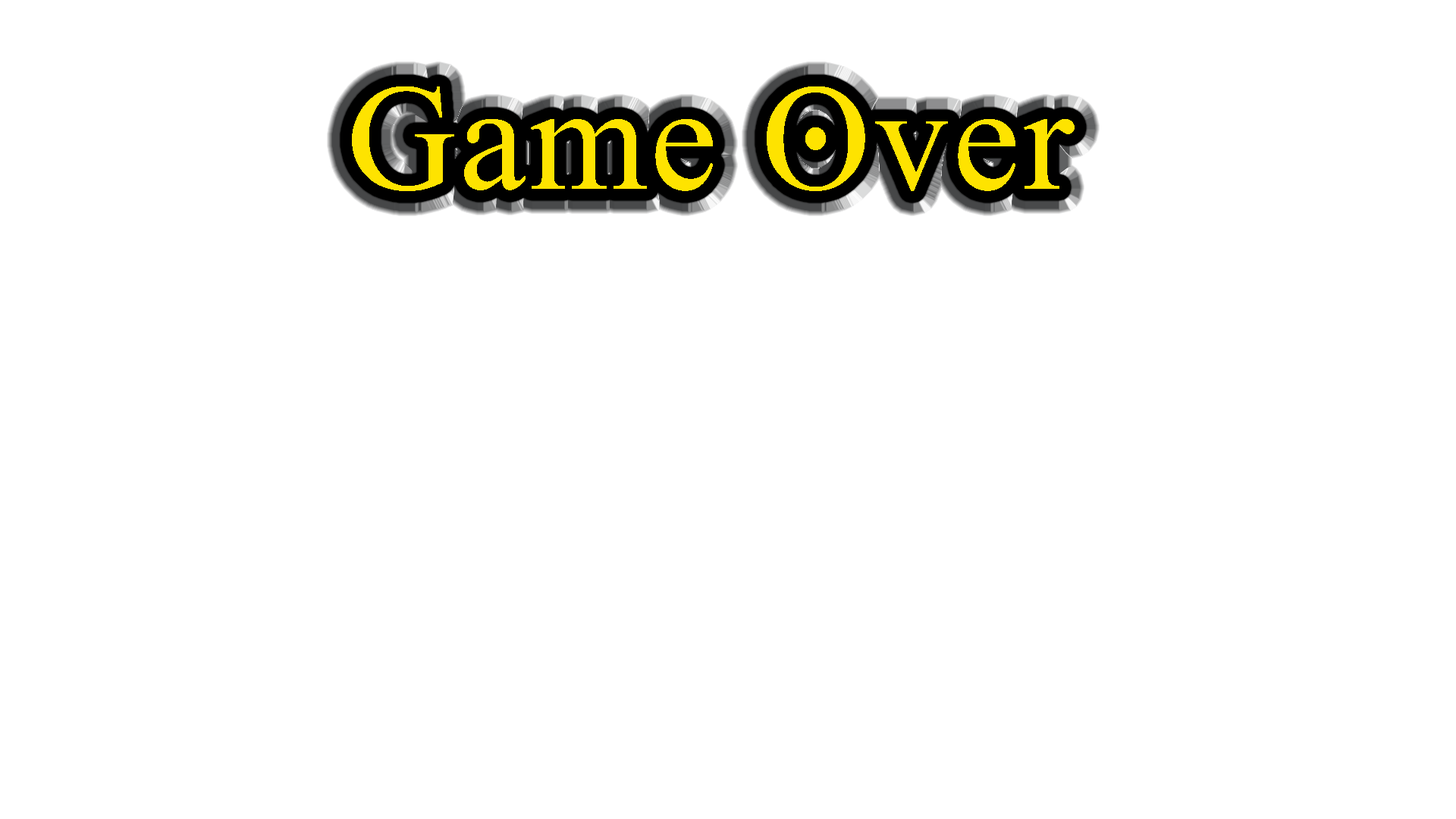
<style>
.page{position:relative;width:1456px;height:819px;background:#ffffff}
.page>*{position:absolute;margin:0}
.t1{font:151.7px "GhostTheory";letter-spacing:0.02em;color:#fee300}
</style>
<div class="page">
<p class="t1" style="left:352px;top:86px;width:723px;height:105px">Game Over</p>
</div>
